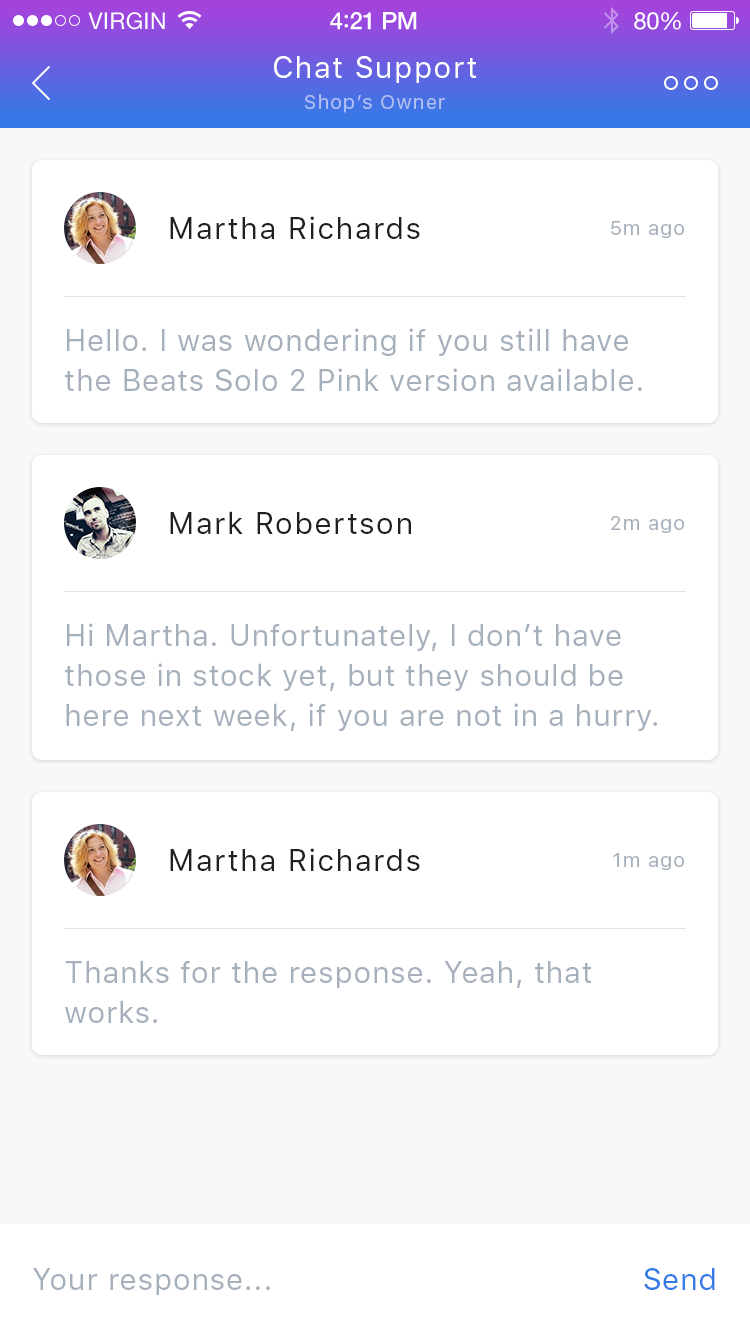
<style>
.page{position:relative;width:750px;height:1334px;background:#ffffff}
.page>*{position:absolute;margin:0}
.t1{font:30px "SFUIText-Regular";letter-spacing:0.05em;color:#ffffff}
.t2{font:20px "SFUIText-Regular";letter-spacing:0.05em;color:#b2c1f2}
.t3{font:30px "SFUIText-Regular";letter-spacing:0.05em;color:#1e2024}
.t4{font:20px "SFUIText-Regular";letter-spacing:0.05em;color:#a6b0bd}
.t5{font:30px/40px "SFUIText-Regular";letter-spacing:0.025em;color:#a6b0bd}
.t6{font:30px "SFUIText-Regular";letter-spacing:0.025em;color:#a6b0bd}
.t7{font:30px "SFUIText-Regular";letter-spacing:0.025em;color:#327ae5}
</style>
<div class="page">
<p class="t1" style="left:274px;top:56px;width:202px;height:27px">Chat Support</p>
<p class="t2" style="left:305px;top:94px;width:140px;height:19px">Shop’s Owner</p>
<p class="t3" style="left:170px;top:216px;width:250px;height:23px">Martha Richards</p>
<p class="t4" style="left:611px;top:221px;width:73px;height:17px">5m ago</p>
<p class="t5" style="left:65px;top:328px;width:577px;height:63px">Hello. I was wondering if you still have the Beats Solo 2 Pink version available.</p>
<p class="t3" style="left:170px;top:511px;width:241px;height:23px">Mark Robertson</p>
<p class="t4" style="left:611px;top:516px;width:73px;height:17px">2m ago</p>
<p class="t5" style="left:65px;top:623px;width:592px;height:108px">Hi Martha. Unfortunately, I don’t have those in stock yet, but they should be here next week, if you are not in a hurry.</p>
<p class="t3" style="left:170px;top:848px;width:250px;height:23px">Martha Richards</p>
<p class="t4" style="left:613px;top:853px;width:71px;height:17px">1m ago</p>
<p class="t5" style="left:65px;top:960px;width:526px;height:63px">Thanks for the response. Yeah, that works.</p>
<p class="t6" style="left:33px;top:1268px;width:237px;height:27px">Your response...</p>
<p class="t7" style="left:644px;top:1268px;width:71px;height:22px">Send</p>
</div>
